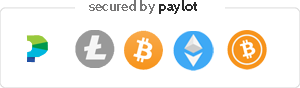
<style>
.page{position:relative;width:300px;height:88px;background:#ffffff}
.page>*{position:absolute;margin:0}
.t1{font:14px "Cabin-SemiBold";color:#777676}
.t2{font:14px "Cabin-Bold";color:#2b2b2b}
</style>
<div class="page">
<p class="t1" style="left:89px;top:0px;width:108px;height:14px">secured by <span class="t2">paylot</span></p>
</div>
